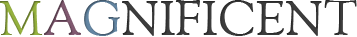
<style>
.page{position:relative;width:357px;height:37px;background:#ffffff}
.page>*{position:absolute;margin:0}
.t1{font:48px "OFLGoudyStMTT";color:#3d3d3d}
.t2{font:48px "OFLGoudyStMTT";color:#96b23e}
.t3{font:48px "OFLGoudyStMTT";color:#815970}
.t4{font:48px "OFLGoudyStMTT";color:#6486a3}
</style>
<div class="page">
<p class="t1" style="left:0px;top:0px;width:357px;height:36px"><span class="t2">M</span><span class="t3">A</span><span class="t4">G</span>NIFICENT</p>
</div>
